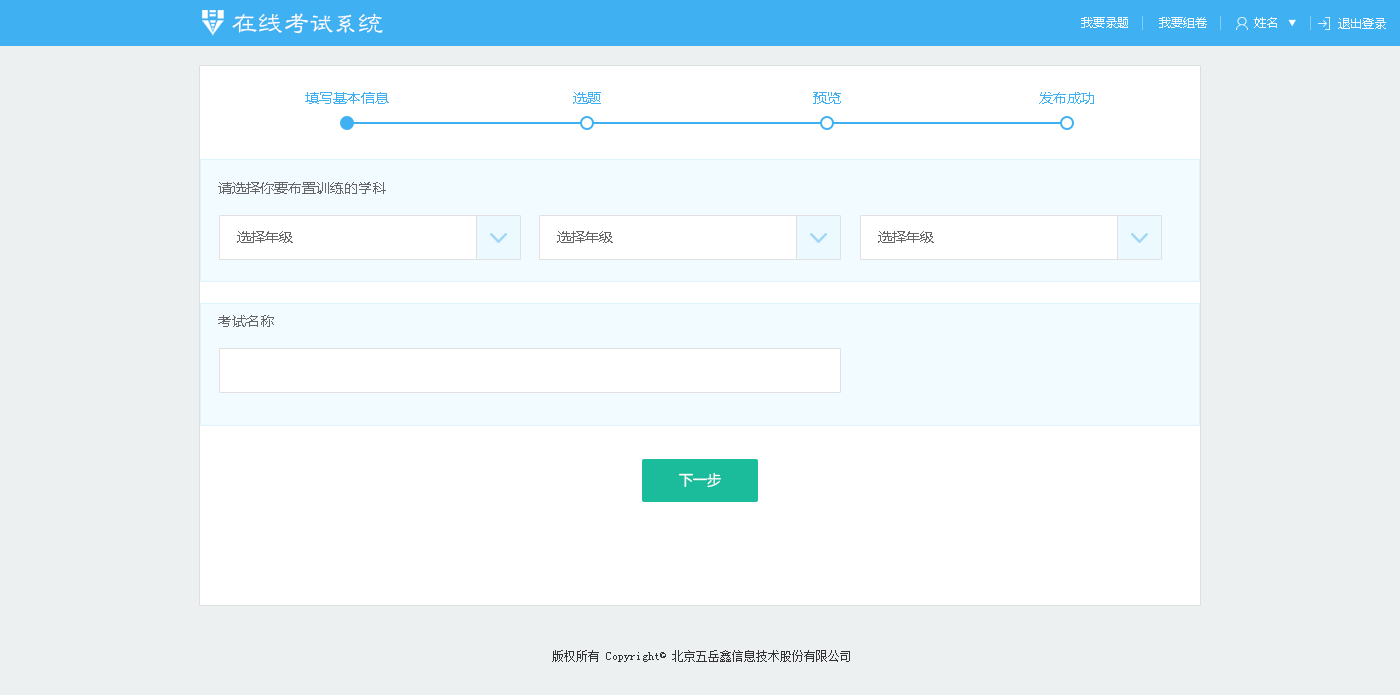
<style>
.page{position:relative;width:1400px;height:698px;background:#ecf0f1}
.page>*{position:absolute;margin:0}
.t1{font:26px "GBJenLei-Medium";color:#ffffff}
.t2{font:24px "GBJenLei-Medium";color:#ffffff}
.t3{font:12px "MicrosoftYaHei";color:#ffffff}
.t4{font:14px "MicrosoftYaHei";color:#3fb0f2}
.t5{font:14px "MicrosoftYaHei";color:#666666}
.t6{font:14.4px "MicrosoftYaHei";color:#ffffff}
.t7{font:12px "NSimSun";color:#333333}
</style>
<div class="page">
<p class="t1" style="left:232px;top:13px;width:151px;height:21px">在线考<span class="t2">试系</span>统</p>
<p class="t3" style="left:1081px;top:17px;width:47px;height:11px;opacity:0.9">我要录题</p>
<p class="t3" style="left:1159px;top:17px;width:48px;height:11px;opacity:0.9">我要组卷</p>
<p class="t3" style="left:1254px;top:17px;width:23px;height:11px;opacity:0.9">姓名</p>
<p class="t3" style="left:1338px;top:18px;width:48px;height:11px;opacity:0.9">退出登录</p>
<p class="t4" style="left:305px;top:92px;width:84px;height:12px">填写基本信息</p>
<p class="t4" style="left:573px;top:92px;width:28px;height:12px">选题</p>
<p class="t4" style="left:813px;top:92px;width:28px;height:12px">预览</p>
<p class="t4" style="left:1039px;top:92px;width:55px;height:12px">发布成功</p>
<p class="t5" style="left:218px;top:182px;width:168px;height:12px">请选择你要布置训练的学科</p>
<p class="t5" style="left:237px;top:231px;width:56px;height:12px">选择年级</p>
<p class="t5" style="left:557px;top:231px;width:56px;height:12px">选择年级</p>
<p class="t5" style="left:878px;top:231px;width:56px;height:12px">选择年级</p>
<p class="t5" style="left:218px;top:315px;width:56px;height:12px">考试名称</p>
<p class="t6" style="left:679px;top:472px;width:42px;height:16px">下一步</p>
<p class="t7" style="left:552px;top:650px;width:298px;height:12px">版权所有 Copyright© 北京五岳鑫信息技术股份有限公司</p>
</div>
